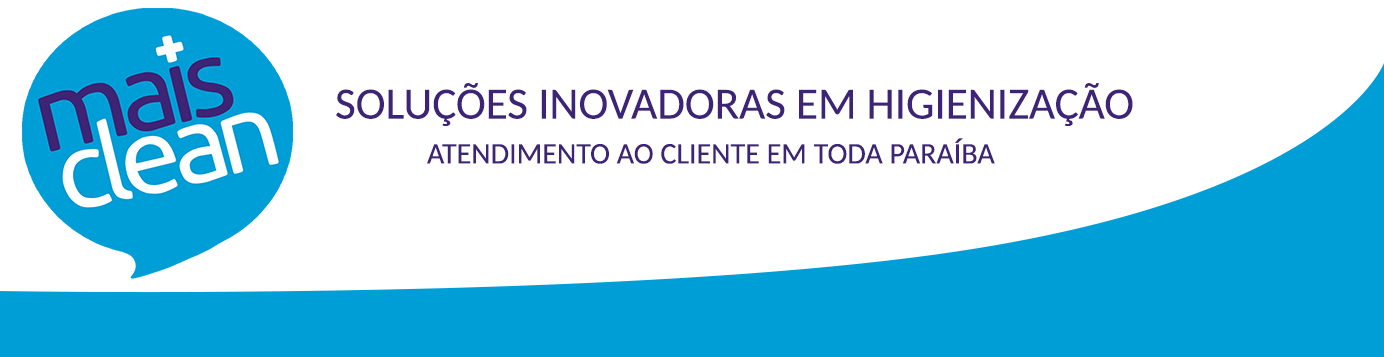
<style>
.page{position:relative;width:1384px;height:357px;background:#ffffff}
.page>*{position:absolute;margin:0}
.t1{font:44.5px "Carlito";color:#3d2476}
.t2{font:30px "Carlito";color:#3d2476}
</style>
<div class="page">
<p class="t1" style="left:336px;top:83px;width:797px;height:43px">SOLUÇÕES INOVADORAS EM HIGIENIZAÇÃO</p>
<p class="t2" style="left:427px;top:138px;width:568px;height:26px">ATENDIMENTO AO CLIENTE EM TODA PARAÍBA</p>
</div>
